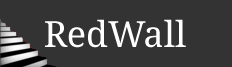
<style>
.page{position:relative;width:232px;height:67px;background:#333333}
.page>*{position:absolute;margin:0}
.t1{font:36px "DroidSerif";color:#ffffff}
</style>
<div class="page">
<p class="t1" style="left:45px;top:19px;width:141px;height:29px">RedWall</p>
</div>
